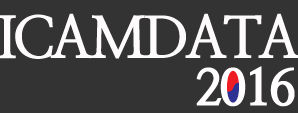
<style>
.page{position:relative;width:298px;height:113px;background:#333333}
.page>*{position:absolute;margin:0}
.t1{font:58px "NanumMyeongjoExtraBold";letter-spacing:-0.07em;color:#fdfbfb}
.t2{font:50px "NanumMyeongjoExtraBold";letter-spacing:-0.07em;color:#fffdfd;font-weight:bold}
</style>
<div class="page">
<p class="t1" style="left:0px;top:13px;width:300px;height:46px">ICAMDATA</p>
<p class="t2" style="left:196px;top:66px;width:99px;height:41px">2016</p>
</div>
